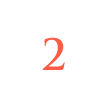
<style>
.page{position:relative;width:107px;height:107px;background:#ffffff}
.page>*{position:absolute;margin:0}
.t1{font:42px "TrajanPro-Bold";color:#ff5c46}
</style>
<div class="page">
<p class="t1" style="left:42px;top:37px;width:23px;height:33px">2</p>
</div>
